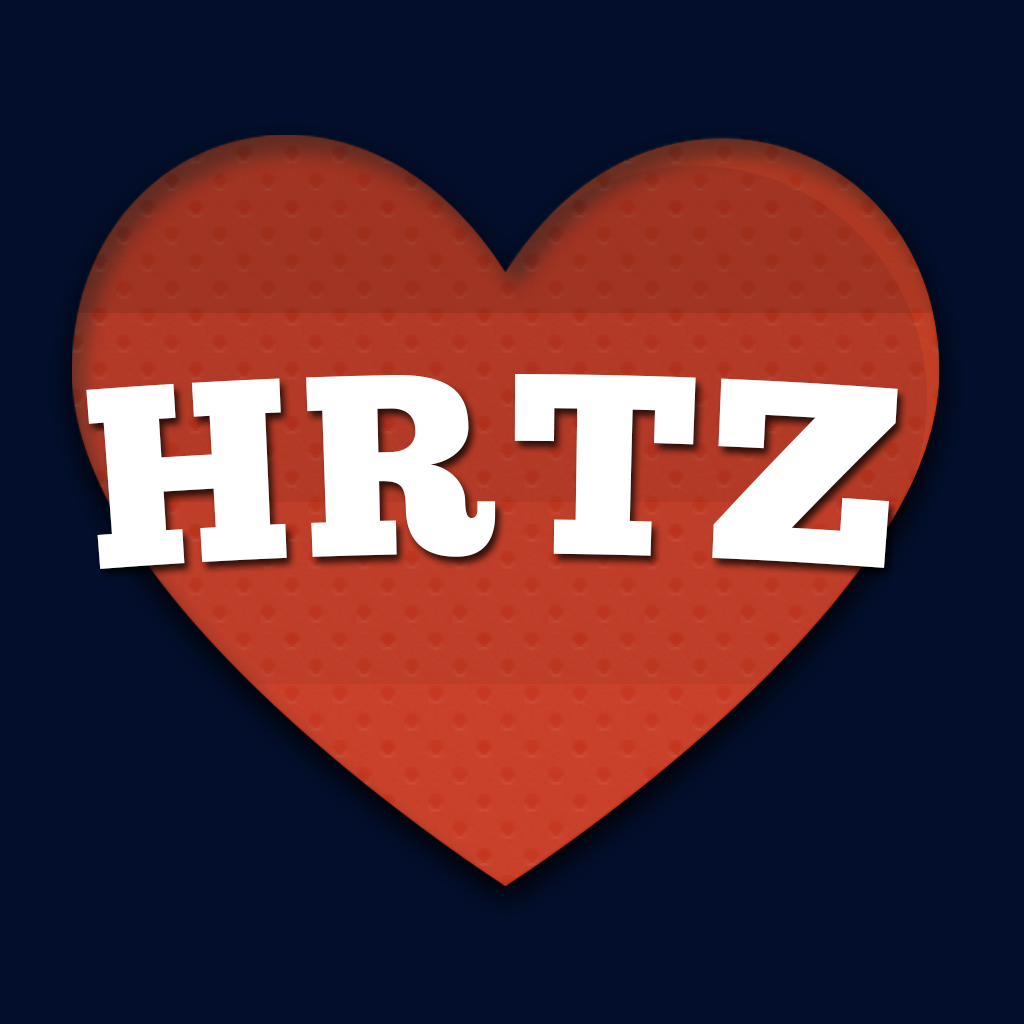
<style>
.page{position:relative;width:1024px;height:1024px;background:#020e2b}
.page>*{position:absolute;margin:0}
.t1{font:256.7px "ChunkFive-Roman";letter-spacing:0.05em;color:#ffffff}
</style>
<div class="page">
<p class="t1" style="left:86px;top:374px;width:812px;height:195px">HRTZ</p>
</div>
